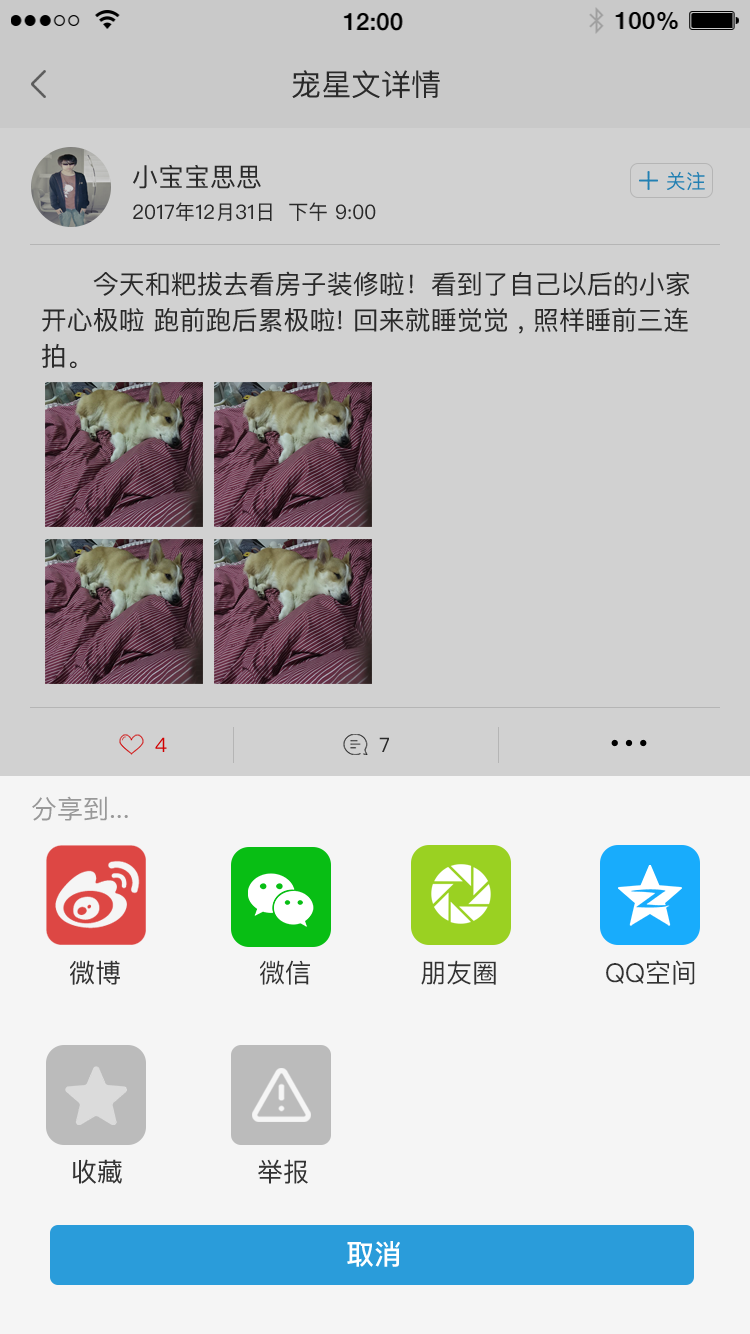
<style>
.page{position:relative;width:750px;height:1334px;background:#d1d1d1}
.page>*{position:absolute;margin:0}
.t1{font:30px "PingFangSC";color:#333333}
.t2{font:26px "PingFangSC";color:#333333}
.t3{font:20px "PingFangSC";color:#2280b3}
.t4{font:20px "PingFangSC";color:#333333}
.t5{font:26px/36px "PingFangSC";color:#333333}
.t6{font:20px "PingFangSC";color:#d10000}
.t7{font:26px "PingFangSC-Regular";color:#999999}
.t8{font:26px "PingFangSC-Regular";color:#333333}
.t9{font:28px "PingFangSC-Medium";color:#ffffff}
</style>
<div class="page">
<p class="t1" style="left:292px;top:70px;width:148px;height:28px">宠星文详情</p>
<p class="t2" style="left:133px;top:164px;width:128px;height:25px">小宝宝思思</p>
<p class="t3" style="left:666px;top:171px;width:39px;height:20px">关注</p>
<p class="t4" style="left:133px;top:202px;width:243px;height:19px">2017年12月31日  下午 9:00</p>
<p class="t5" style="left:42px;top:271px;width:648px;height:97px">今天和粑拔去看房子装修啦！看到了自己以后的小家开心极啦 跑前跑后累极啦! 回来就睡觉觉 , 照样睡前三连拍。</p>
<p class="t6" style="left:155px;top:737px;width:12px;height:15px">4</p>
<p class="t4" style="left:379px;top:737px;width:10px;height:15px">7</p>
<p class="t7" style="left:32px;top:796px;width:96px;height:25px">分享到...</p>
<p class="t2" style="left:70px;top:960px;width:50px;height:25px">微博</p>
<p class="t8" style="left:260px;top:960px;width:50px;height:25px">微信</p>
<p class="t8" style="left:421px;top:960px;width:75px;height:25px">朋友圈</p>
<p class="t8" style="left:606px;top:960px;width:89px;height:25px">QQ空间</p>
<p class="t2" style="left:72px;top:1159px;width:50px;height:25px">收藏</p>
<p class="t2" style="left:258px;top:1159px;width:50px;height:25px">举报</p>
<p class="t9" style="left:347px;top:1241px;width:53px;height:26px">取消</p>
</div>
